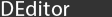
<style>
.page{position:relative;width:112px;height:17px;background:#333333}
.page>*{position:absolute;margin:0}
.t1{font:21.2px "MyriadPro-Regular";letter-spacing:0.025em;color:#ffffff}
</style>
<div class="page">
<p class="t1" style="left:1px;top:1px;width:69px;height:15px">DEditor</p>
</div>
